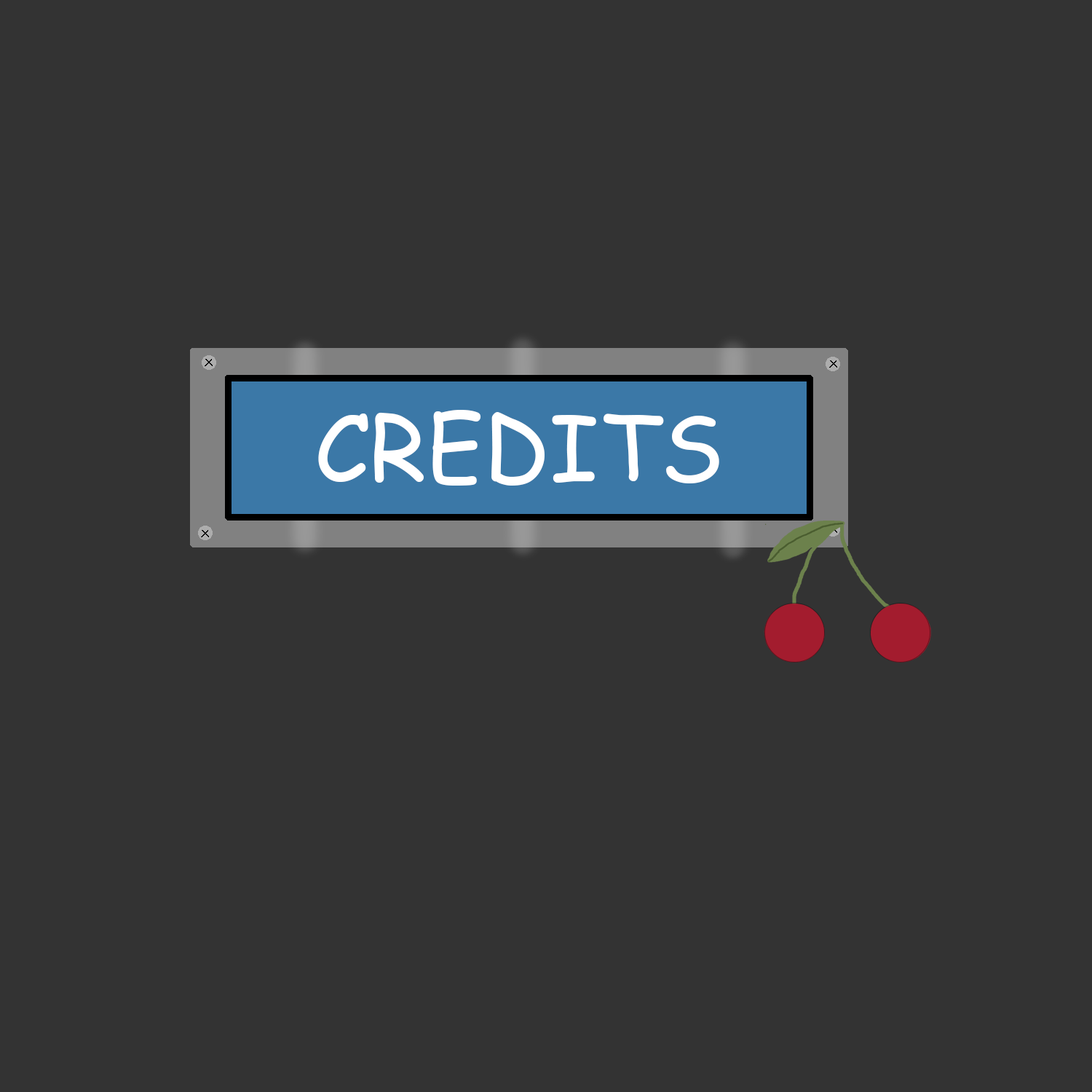
<style>
.page{position:relative;width:1092px;height:1092px;background:#333333}
.page>*{position:absolute;margin:0}
.t1{font:91px "ComicSansMS";color:#ffffff}
</style>
<div class="page">
<p class="t1" style="left:318px;top:410px;width:401px;height:76px">CREDITS</p>
</div>
